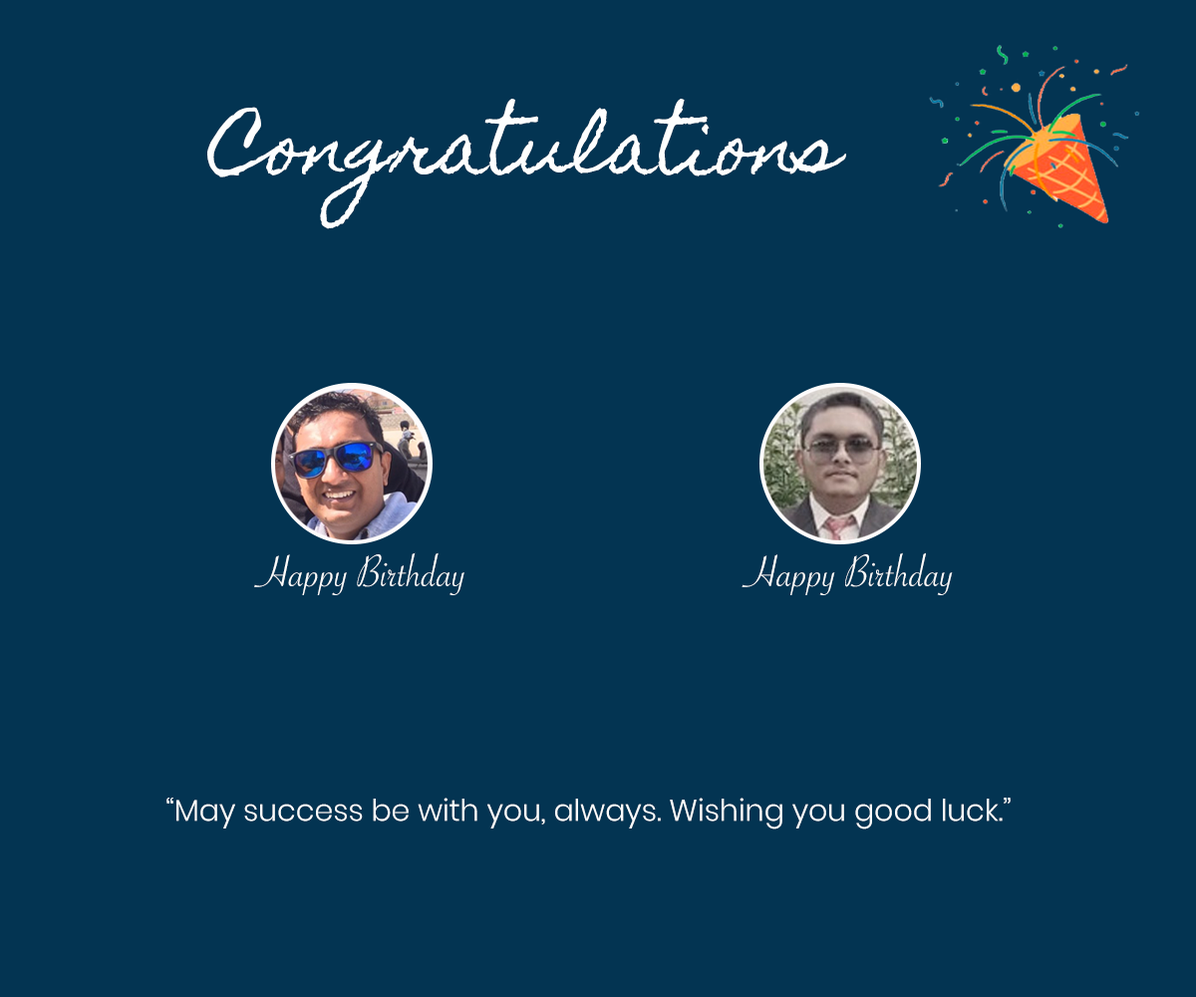
<style>
.page{position:relative;width:1196px;height:997px;background:#033452}
.page>*{position:absolute;margin:0}
.t1{font:71.7px "HomemadeApple-Regular";color:#fdfefe}
.t2{font:47.8px "SavoyeLetPlain";color:#fdfefe}
.t3{font:29.9px "Poppins-Light";color:#fdfefe}
</style>
<div class="page">
<p class="t1" style="left:207px;top:99px;width:639px;height:130px;text-align:center">Congratulations</p>
<p class="t2" style="left:254px;top:552px;width:211px;height:43px">Happy Birthday</p>
<p class="t2" style="left:742px;top:552px;width:211px;height:43px">Happy Birthday</p>
<p class="t3" style="left:166px;top:797px;width:845px;height:32px">“May success be with you, always. Wishing you good luck.”</p>
</div>
